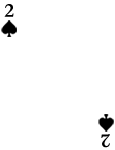
<style>
.page{position:relative;width:115px;height:150px;background:#ffffff}
.page>*{position:absolute;margin:0}
.t1{font:20px "Garamond-Bold";letter-spacing:-0.005em;color:#000000}
</style>
<div class="page">
<p class="t1" style="left:4px;top:4px;width:10px;height:13px">23456789K9QA</p>
<p class="t1" style="left:101px;top:134px;width:9px;height:14px;rotate:178deg">2</p>
</div>
